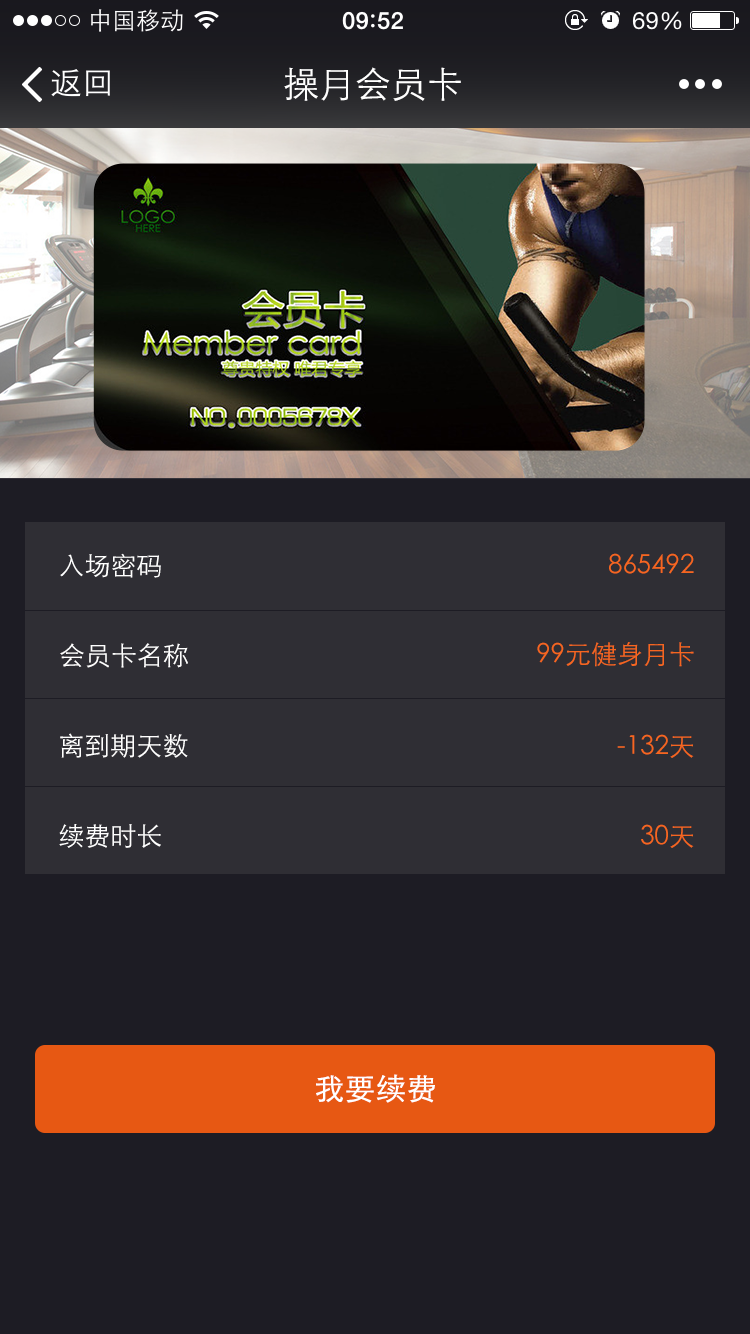
<style>
.page{position:relative;width:750px;height:1334px;background:#1d1c24}
.page>*{position:absolute;margin:0}
.t1{font:36px "STXihei";color:#ffffff}
.t2{font:26px "STXihei";color:#ffffff}
.t3{font:26px "STXihei";color:#f66620}
.t4{font:30px "STXihei";color:#ffffff;font-weight:bold}
</style>
<div class="page">
<p class="t1" style="left:284px;top:67px;width:177px;height:34px">操月会员卡</p>
<p class="t2" style="left:60px;top:553px;width:101px;height:25px">入场密码</p>
<p class="t3" style="left:609px;top:553px;width:85px;height:21px">865492</p>
<p class="t2" style="left:60px;top:643px;width:128px;height:25px">会员卡名称</p>
<p class="t3" style="left:537px;top:642px;width:157px;height:25px">99元健身月卡</p>
<p class="t2" style="left:60px;top:733px;width:128px;height:25px">离到期天数</p>
<p class="t3" style="left:617px;top:734px;width:77px;height:24px">-132天</p>
<p class="t2" style="left:59px;top:824px;width:102px;height:24px">续费时长</p>
<p class="t3" style="left:641px;top:824px;width:53px;height:24px">30天</p>
<p class="t4" style="left:316px;top:1074px;width:119px;height:29px">我要续费</p>
</div>
